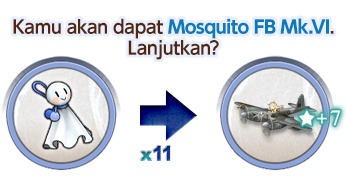
<style>
.page{position:relative;width:347px;height:177px;background:#ffffff}
.page>*{position:absolute;margin:0}
.t1{font:18px/21px "UDShinGoPro-Bold";letter-spacing:-0.04em;color:#0d7bba}
.t2{font:18px/21px "UDShinGoPro-DeBold";letter-spacing:-0.04em;color:#50260d}
</style>
<div class="page">
<p class="t1" style="left:13px;top:18px;width:321px;height:42px;text-align:center"><span class="t2">Kamu akan dapat </span>Mosquito FB Mk.VI<span class="t2">.<br>Lanjutkan?</span></p>
</div>
